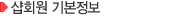
<style>
.page{position:relative;width:180px;height:18px;background:#ffffff}
.page>*{position:absolute;margin:0}
.t1{font:14.7px "YDIYGO330";letter-spacing:-0.03em;color:#373737;scale:0.92 1}
</style>
<div class="page">
<p class="t1" style="left:11px;top:1px;width:89px;height:14px">샵회원 기본정보</p>
</div>
